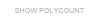
<style>
.page{position:relative;width:100px;height:20px;background:#ffffff}
.page>*{position:absolute;margin:0}
.t1{font:7.2px "ArialMT";color:#c0c0c0;text-transform:uppercase}
</style>
<div class="page">
<p class="t1" style="left:15px;top:8px;width:69px;height:5px">Show Polycount</p>
</div>
